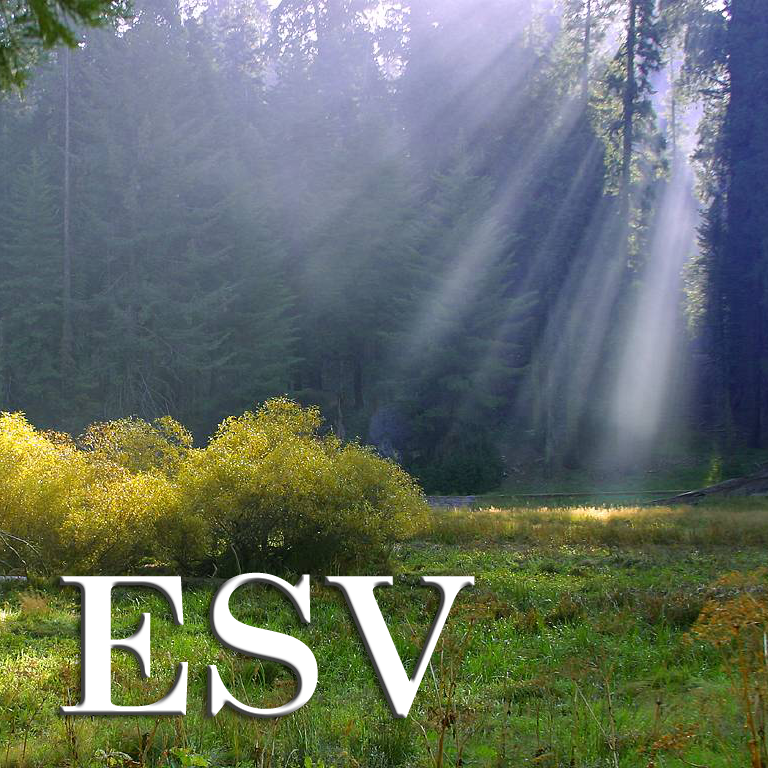
<style>
.page{position:relative;width:768px;height:768px}
.page>*{position:absolute;margin:0}
.t1{font:192px "CenturySchoolbook-Bold";color:#ffffff}
</style>
<div class="page">
<p class="t1" style="left:59px;top:572px;width:416px;height:146px">ESV</p>
</div>
